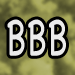
<style>
.page{position:relative;width:75px;height:75px}
.page>*{position:absolute;margin:0}
.t1{font:52.3px "Chalkboard";letter-spacing:0.01em;color:#ebebeb;scale:0.69 1}
</style>
<div class="page">
<p class="t1" style="left:7px;top:19px;width:59px;height:37px">BBB</p>
</div>
